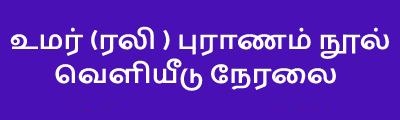
<style>
.page{position:relative;width:400px;height:120px;background:#4910b5}
.page>*{position:absolute;margin:0}
.t1{font:28px "Catamaran-Bold";color:#ffffff}
</style>
<div class="page">
<p class="t1" style="left:10px;top:26px;width:379px;height:65px">உமர் (ரலி ) புராணம் நூல் <br>       வெளியீடு நேரலை</p>
</div>
